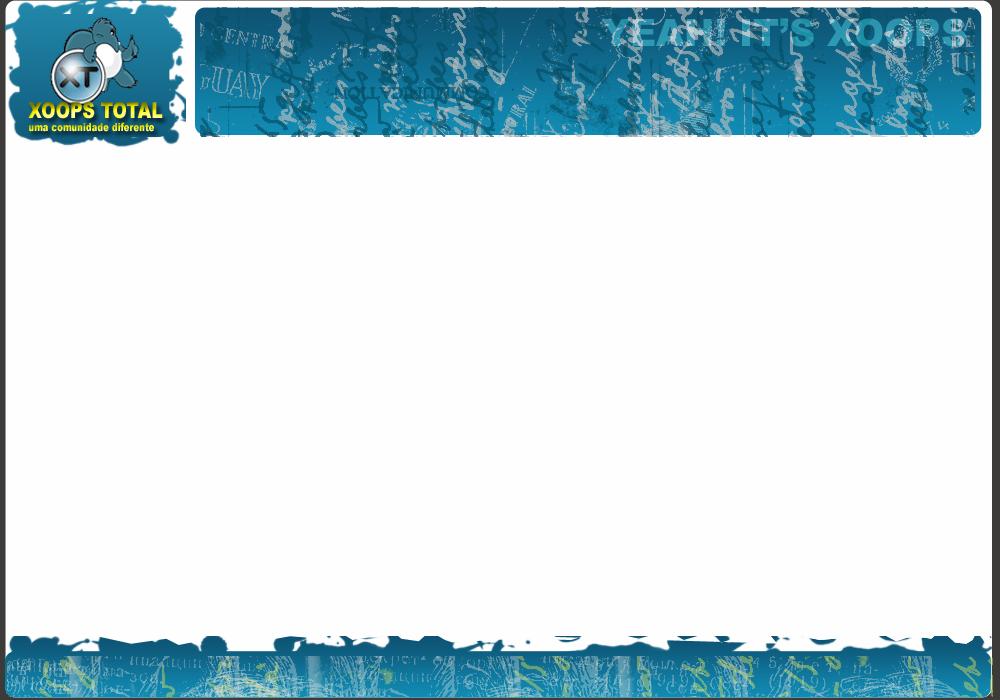
<style>
.page{position:relative;width:1000px;height:700px;background:#fffefe}
.page>*{position:absolute;margin:0}
.t1{font:37.8px "Arial-Black";color:#2d98b1;scale:0.96 1}
.t2{font:11px "Arial-Black";scale:0.79 1}
.t3{font:22px "Arial-Black";scale:0.79 1}
</style>
<div class="page">
<p class="t1" style="left:602px;top:18px;width:364px;height:29px">YEAH! IT’S XOOPS</p>
<p class="t2" style="left:28px;top:102px;width:135px;height:30px"><span class="t3">XOOPS TOTAL<br></span>uma comunidade diferente</p>
</div>
